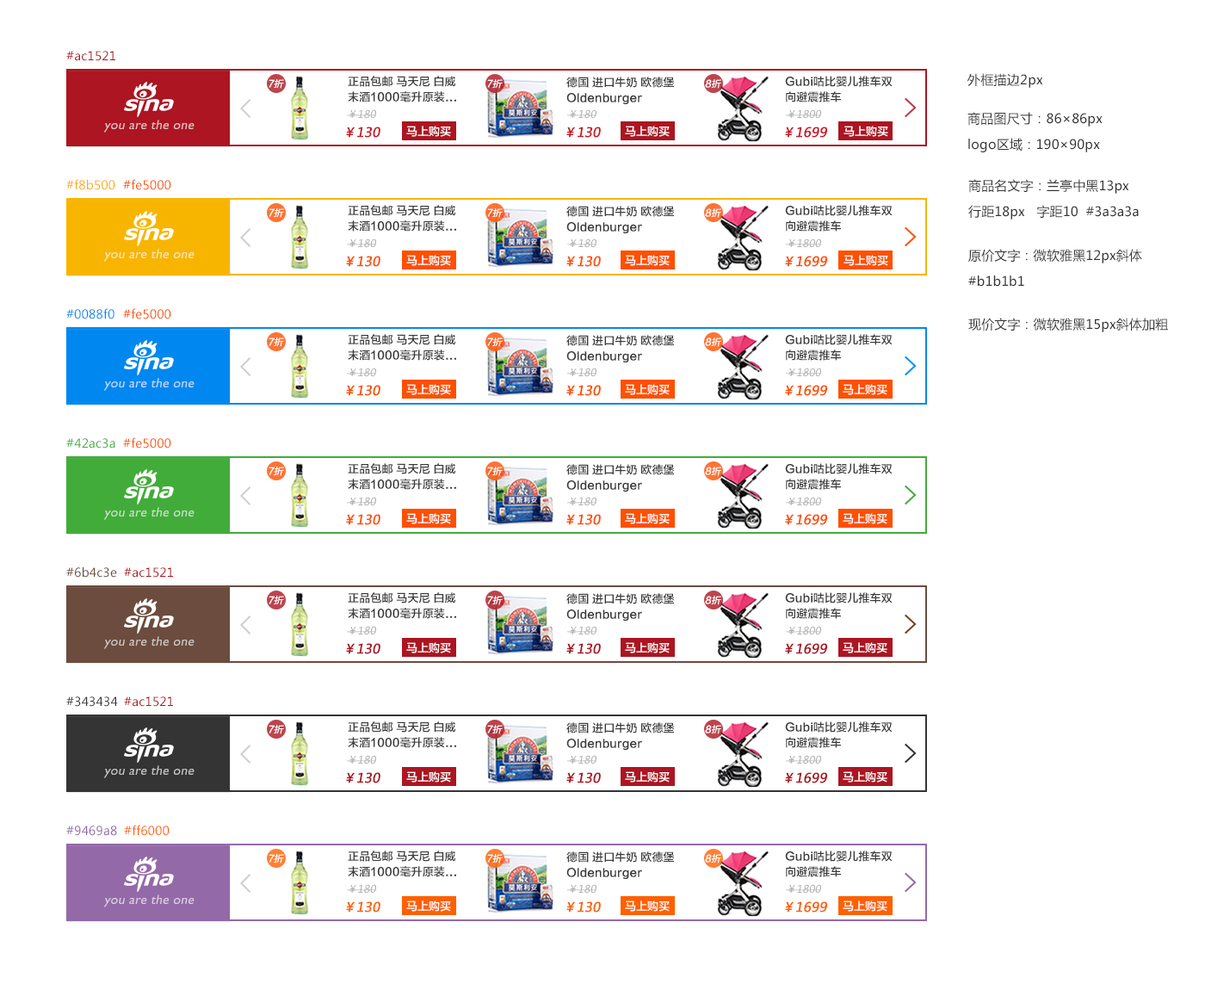
<style>
.page{position:relative;width:1205px;height:990px;background:#ffffff}
.page>*{position:absolute;margin:0}
.t1{font:12px "MicrosoftYaHei";letter-spacing:0.018em;color:#ac1521}
.t2{font:11.2px/15.5px "FZLTZHK--GBK1-0";letter-spacing:0.01em;color:#3a3a3a}
.t3{font:12.9px "MicrosoftYaHei";letter-spacing:0.018em;color:#353535}
.t4{font:9.5px "FZLTZHK--GBK1-0";color:#ffffff;font-style:italic}
.t5{font:10.3px "MicrosoftYaHei";letter-spacing:0.01em;color:#b1b1b1;font-style:italic}
.t6{font:12.9px/25.8px "MicrosoftYaHei";letter-spacing:0.018em;color:#353535}
.t7{font:13.3px "GillSansMT";letter-spacing:0.018em;color:#e2bec0;font-style:italic}
.t8{font:11.2px "FZLTZHK--GBK1-0";color:#ffffff}
.t9{font:12.9px "MicrosoftYaHei";color:#cb1927;font-weight:bold;font-style:italic}
.t10{font:12px "MicrosoftYaHei";letter-spacing:0.018em;color:#ffaa00}
.t11{font:12px "MicrosoftYaHei";letter-spacing:0.018em;color:#fe5000}
.t12{font:12.9px/25.8px "MicrosoftYaHei";letter-spacing:0.01em;color:#353535}
.t13{font:13.3px "GillSansMT";letter-spacing:0.018em;color:#fce5bb;font-style:italic}
.t14{font:12.9px "MicrosoftYaHei";color:#fe5000;font-weight:bold;font-style:italic}
.t15{font:12px "MicrosoftYaHei";letter-spacing:0.018em;color:#0088f0}
.t16{font:12.9px "MicrosoftYaHei";letter-spacing:0.01em;color:#353535}
.t17{font:13.3px "GillSansMT";letter-spacing:0.018em;color:#bbd7f9;font-style:italic}
.t18{font:12px "MicrosoftYaHei";letter-spacing:0.018em;color:#42ac3a}
.t19{font:13.3px "GillSansMT";letter-spacing:0.018em;color:#c5e2c4;font-style:italic}
.t20{font:12px "MicrosoftYaHei";letter-spacing:0.018em;color:#6b4c3e}
.t21{font:13.3px "GillSansMT";letter-spacing:0.018em;color:#cfc7c5;font-style:italic}
.t22{font:12.9px "MicrosoftYaHei";color:#ac1521;font-weight:bold;font-style:italic}
.t23{font:12px "MicrosoftYaHei";letter-spacing:0.018em;color:#343434}
.t24{font:13.3px "GillSansMT";letter-spacing:0.018em;color:#c3c3c3;font-style:italic}
.t25{font:12px "MicrosoftYaHei";letter-spacing:0.018em;color:#9469a8}
.t26{font:12px "MicrosoftYaHei";letter-spacing:0.018em;color:#ff6000}
.t27{font:13.3px "GillSansMT";letter-spacing:0.018em;color:#dacee0;font-style:italic}
.t28{font:12.9px "MicrosoftYaHei";color:#ff6000;font-weight:bold;font-style:italic}
</style>
<div class="page">
<p class="t1" style="left:66px;top:51px;width:49px;height:10px">#ac1521</p>
<p class="t2" style="left:348px;top:76px;width:108px;height:26px">正品包邮 马天尼 白威<br>末酒1000毫升原装...</p>
<p class="t2" style="left:566px;top:77px;width:109px;height:27px">德国 进口牛奶 欧德堡<br>Oldenburger</p>
<p class="t2" style="left:785px;top:76px;width:107px;height:26px">Gubi咕比婴儿推车双<br>向避震推车</p>
<p class="t3" style="left:967px;top:73px;width:76px;height:15px">外框描边2px</p>
<p class="t4" style="left:269px;top:79px;width:15px;height:10px">7折</p>
<p class="t4" style="left:487px;top:79px;width:16px;height:10px">7折</p>
<p class="t4" style="left:705px;top:79px;width:16px;height:10px">8折</p>
<p class="t5" style="left:347px;top:109px;width:29px;height:10px">￥180</p>
<p class="t5" style="left:567px;top:109px;width:29px;height:10px">￥180</p>
<p class="t5" style="left:786px;top:109px;width:35px;height:10px">￥1800</p>
<p class="t6" style="left:967px;top:112px;width:135px;height:40px">商品图尺寸：86×86px<br>logo区域：190×90px</p>
<p class="t7" style="left:103px;top:120px;width:91px;height:13px">you are the one</p>
<p class="t8" style="left:406px;top:126px;width:45px;height:11px">马上购买</p>
<p class="t8" style="left:625px;top:126px;width:45px;height:11px">马上购买</p>
<p class="t8" style="left:843px;top:126px;width:45px;height:11px">马上购买</p>
<p class="t9" style="left:346px;top:127px;width:34px;height:11px">￥130</p>
<p class="t9" style="left:566px;top:127px;width:35px;height:11px">￥130</p>
<p class="t9" style="left:785px;top:127px;width:42px;height:11px">￥1699</p>
<p class="t10" style="left:66px;top:179px;width:49px;height:11px">#f8b500</p>
<p class="t11" style="left:123px;top:179px;width:48px;height:11px">#fe5000</p>
<p class="t12" style="left:968px;top:179px;width:171px;height:40px">商品名文字：兰亭中黑13px <br>行距18px   字距10  #3a3a3a</p>
<p class="t4" style="left:269px;top:208px;width:15px;height:10px">7折</p>
<p class="t2" style="left:348px;top:205px;width:108px;height:27px">正品包邮 马天尼 白威<br>末酒1000毫升原装...</p>
<p class="t4" style="left:487px;top:208px;width:16px;height:10px">7折</p>
<p class="t2" style="left:566px;top:206px;width:109px;height:27px">德国 进口牛奶 欧德堡<br>Oldenburger</p>
<p class="t4" style="left:705px;top:208px;width:16px;height:10px">8折</p>
<p class="t2" style="left:785px;top:205px;width:107px;height:27px">Gubi咕比婴儿推车双<br>向避震推车</p>
<p class="t5" style="left:347px;top:238px;width:29px;height:10px">￥180</p>
<p class="t5" style="left:567px;top:238px;width:29px;height:10px">￥180</p>
<p class="t5" style="left:786px;top:238px;width:35px;height:10px">￥1800</p>
<p class="t13" style="left:103px;top:249px;width:91px;height:13px">you are the one</p>
<p class="t14" style="left:346px;top:256px;width:34px;height:11px">￥130</p>
<p class="t8" style="left:406px;top:255px;width:45px;height:11px">马上购买</p>
<p class="t14" style="left:566px;top:256px;width:35px;height:11px">￥130</p>
<p class="t8" style="left:625px;top:255px;width:45px;height:11px">马上购买</p>
<p class="t14" style="left:785px;top:256px;width:42px;height:11px">￥1699</p>
<p class="t8" style="left:843px;top:255px;width:45px;height:11px">马上购买</p>
<p class="t12" style="left:968px;top:249px;width:174px;height:38px">原价文字：微软雅黑12px斜体 <br>#b1b1b1</p>
<p class="t15" style="left:66px;top:308px;width:48px;height:11px">#0088f0</p>
<p class="t11" style="left:123px;top:308px;width:48px;height:11px">#fe5000</p>
<p class="t16" style="left:968px;top:318px;width:200px;height:14px">现价文字：微软雅黑15px斜体加粗</p>
<p class="t4" style="left:269px;top:337px;width:15px;height:10px">7折</p>
<p class="t2" style="left:348px;top:334px;width:108px;height:27px">正品包邮 马天尼 白威<br>末酒1000毫升原装...</p>
<p class="t4" style="left:487px;top:337px;width:16px;height:10px">7折</p>
<p class="t2" style="left:566px;top:335px;width:109px;height:27px">德国 进口牛奶 欧德堡<br>Oldenburger</p>
<p class="t4" style="left:705px;top:337px;width:16px;height:10px">8折</p>
<p class="t2" style="left:785px;top:334px;width:107px;height:27px">Gubi咕比婴儿推车双<br>向避震推车</p>
<p class="t17" style="left:103px;top:378px;width:91px;height:13px">you are the one</p>
<p class="t5" style="left:347px;top:367px;width:29px;height:10px">￥180</p>
<p class="t5" style="left:567px;top:367px;width:29px;height:10px">￥180</p>
<p class="t5" style="left:786px;top:367px;width:35px;height:10px">￥1800</p>
<p class="t14" style="left:346px;top:385px;width:34px;height:11px">￥130</p>
<p class="t8" style="left:406px;top:384px;width:45px;height:11px">马上购买</p>
<p class="t14" style="left:566px;top:385px;width:35px;height:11px">￥130</p>
<p class="t8" style="left:625px;top:384px;width:45px;height:11px">马上购买</p>
<p class="t14" style="left:785px;top:385px;width:42px;height:11px">￥1699</p>
<p class="t8" style="left:843px;top:384px;width:44px;height:11px">马上购买</p>
<p class="t11" style="left:123px;top:437px;width:48px;height:11px">#fe5000</p>
<p class="t18" style="left:66px;top:438px;width:49px;height:10px">#42ac3a</p>
<p class="t4" style="left:269px;top:466px;width:15px;height:10px">7折</p>
<p class="t2" style="left:348px;top:463px;width:108px;height:27px">正品包邮 马天尼 白威<br>末酒1000毫升原装...</p>
<p class="t4" style="left:487px;top:466px;width:16px;height:10px">7折</p>
<p class="t2" style="left:566px;top:464px;width:109px;height:27px">德国 进口牛奶 欧德堡<br>Oldenburger</p>
<p class="t4" style="left:705px;top:466px;width:16px;height:10px">8折</p>
<p class="t2" style="left:785px;top:463px;width:107px;height:27px">Gubi咕比婴儿推车双<br>向避震推车</p>
<p class="t5" style="left:347px;top:497px;width:29px;height:9px">￥180</p>
<p class="t5" style="left:567px;top:497px;width:29px;height:9px">￥180</p>
<p class="t5" style="left:786px;top:497px;width:35px;height:9px">￥1800</p>
<p class="t19" style="left:103px;top:507px;width:91px;height:13px">you are the one</p>
<p class="t14" style="left:346px;top:514px;width:34px;height:11px">￥130</p>
<p class="t8" style="left:406px;top:513px;width:45px;height:11px">马上购买</p>
<p class="t14" style="left:566px;top:514px;width:35px;height:11px">￥130</p>
<p class="t8" style="left:625px;top:513px;width:45px;height:11px">马上购买</p>
<p class="t14" style="left:785px;top:514px;width:42px;height:11px">￥1699</p>
<p class="t8" style="left:843px;top:513px;width:44px;height:11px">马上购买</p>
<p class="t20" style="left:66px;top:566px;width:51px;height:11px">#6b4c3e</p>
<p class="t1" style="left:124px;top:567px;width:49px;height:10px">#ac1521</p>
<p class="t2" style="left:348px;top:592px;width:108px;height:27px">正品包邮 马天尼 白威<br>末酒1000毫升原装...</p>
<p class="t2" style="left:566px;top:593px;width:109px;height:27px">德国 进口牛奶 欧德堡<br>Oldenburger</p>
<p class="t2" style="left:785px;top:592px;width:107px;height:27px">Gubi咕比婴儿推车双<br>向避震推车</p>
<p class="t4" style="left:269px;top:596px;width:15px;height:9px">7折</p>
<p class="t4" style="left:487px;top:596px;width:16px;height:9px">7折</p>
<p class="t4" style="left:705px;top:596px;width:16px;height:9px">8折</p>
<p class="t5" style="left:347px;top:626px;width:29px;height:9px">￥180</p>
<p class="t5" style="left:567px;top:626px;width:29px;height:9px">￥180</p>
<p class="t5" style="left:786px;top:626px;width:35px;height:9px">￥1800</p>
<p class="t21" style="left:103px;top:636px;width:91px;height:13px">you are the one</p>
<p class="t22" style="left:346px;top:643px;width:34px;height:11px">￥130</p>
<p class="t8" style="left:406px;top:642px;width:45px;height:11px">马上购买</p>
<p class="t22" style="left:566px;top:643px;width:35px;height:11px">￥130</p>
<p class="t8" style="left:625px;top:642px;width:45px;height:11px">马上购买</p>
<p class="t22" style="left:785px;top:643px;width:42px;height:11px">￥1699</p>
<p class="t8" style="left:843px;top:642px;width:44px;height:11px">马上购买</p>
<p class="t23" style="left:66px;top:696px;width:52px;height:11px">#343434</p>
<p class="t1" style="left:124px;top:696px;width:49px;height:11px">#ac1521</p>
<p class="t4" style="left:269px;top:725px;width:15px;height:9px">7折</p>
<p class="t2" style="left:348px;top:721px;width:108px;height:27px">正品包邮 马天尼 白威<br>末酒1000毫升原装...</p>
<p class="t4" style="left:487px;top:725px;width:16px;height:9px">7折</p>
<p class="t2" style="left:566px;top:722px;width:109px;height:28px">德国 进口牛奶 欧德堡<br>Oldenburger</p>
<p class="t4" style="left:705px;top:725px;width:16px;height:9px">8折</p>
<p class="t2" style="left:785px;top:721px;width:107px;height:27px">Gubi咕比婴儿推车双<br>向避震推车</p>
<p class="t5" style="left:347px;top:755px;width:29px;height:9px">￥180</p>
<p class="t5" style="left:567px;top:755px;width:29px;height:9px">￥180</p>
<p class="t5" style="left:786px;top:755px;width:35px;height:9px">￥1800</p>
<p class="t24" style="left:103px;top:765px;width:91px;height:13px">you are the one</p>
<p class="t22" style="left:346px;top:772px;width:34px;height:11px">￥130</p>
<p class="t8" style="left:406px;top:771px;width:45px;height:11px">马上购买</p>
<p class="t22" style="left:566px;top:772px;width:35px;height:11px">￥130</p>
<p class="t8" style="left:625px;top:771px;width:45px;height:11px">马上购买</p>
<p class="t22" style="left:785px;top:772px;width:42px;height:11px">￥1699</p>
<p class="t8" style="left:843px;top:771px;width:44px;height:11px">马上购买</p>
<p class="t25" style="left:66px;top:825px;width:51px;height:11px">#9469a8</p>
<p class="t26" style="left:124px;top:824px;width:46px;height:12px">#ff6000</p>
<p class="t4" style="left:269px;top:854px;width:15px;height:9px">7折</p>
<p class="t2" style="left:348px;top:850px;width:108px;height:27px">正品包邮 马天尼 白威<br>末酒1000毫升原装...</p>
<p class="t4" style="left:487px;top:854px;width:16px;height:9px">7折</p>
<p class="t2" style="left:566px;top:851px;width:109px;height:28px">德国 进口牛奶 欧德堡<br>Oldenburger</p>
<p class="t4" style="left:705px;top:854px;width:16px;height:9px">8折</p>
<p class="t2" style="left:785px;top:850px;width:107px;height:27px">Gubi咕比婴儿推车双<br>向避震推车</p>
<p class="t5" style="left:347px;top:884px;width:29px;height:9px">￥180</p>
<p class="t5" style="left:567px;top:884px;width:29px;height:9px">￥180</p>
<p class="t5" style="left:786px;top:884px;width:35px;height:9px">￥1800</p>
<p class="t27" style="left:103px;top:894px;width:91px;height:13px">you are the one</p>
<p class="t28" style="left:346px;top:901px;width:34px;height:11px">￥130</p>
<p class="t8" style="left:406px;top:900px;width:45px;height:11px">马上购买</p>
<p class="t28" style="left:566px;top:901px;width:35px;height:11px">￥130</p>
<p class="t8" style="left:625px;top:900px;width:45px;height:11px">马上购买</p>
<p class="t28" style="left:785px;top:901px;width:42px;height:11px">￥1699</p>
<p class="t8" style="left:843px;top:900px;width:44px;height:11px">马上购买</p>
</div>
